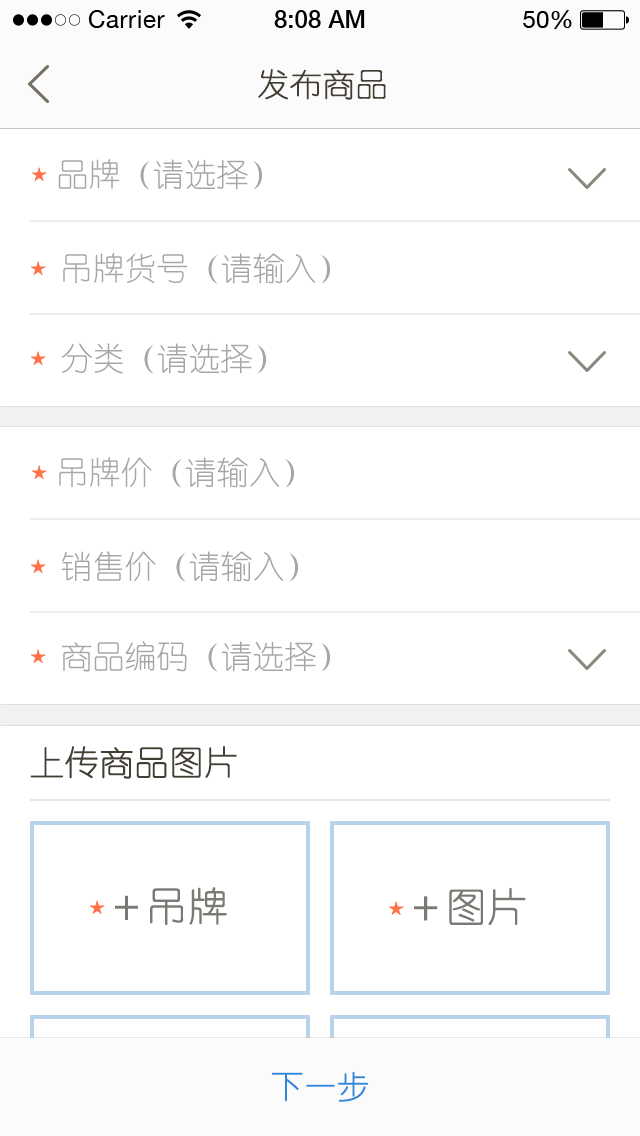
<style>
.page{position:relative;width:640px;height:1136px;background:#ffffff}
.page>*{position:absolute;margin:0}
.t1{font:32px "YouYuan";color:#433d33;text-transform:uppercase;font-weight:bold}
.t2{font:32px "YouYuan";color:#a7a6a3;text-transform:uppercase}
.t3{font:34px "YouYuan";color:#433e34;text-transform:uppercase;font-weight:bold}
.t4{font:40px "YouYuan";color:#7b7973;text-transform:uppercase;font-weight:bold}
.t5{font:32px "YouYuan";color:#2f88da;text-transform:uppercase;font-weight:bold}
</style>
<div class="page">
<p class="t1" style="left:258px;top:69px;width:128px;height:31px">发布商品</p>
<p class="t2" style="left:58px;top:159px;width:204px;height:31px">品牌（请选择）</p>
<p class="t2" style="left:63px;top:253px;width:267px;height:31px">吊牌货号（请输入）</p>
<p class="t2" style="left:61px;top:343px;width:205px;height:31px">分类（请选择）</p>
<p class="t2" style="left:59px;top:457px;width:235px;height:31px">吊牌价（请输入）</p>
<p class="t2" style="left:61px;top:551px;width:237px;height:31px">销售价（请输入）</p>
<p class="t2" style="left:61px;top:641px;width:269px;height:31px">商品编码（请选择）</p>
<p class="t3" style="left:30px;top:746px;width:207px;height:33px">上传商品图片</p>
<p class="t4" style="left:115px;top:887px;width:112px;height:39px">＋吊牌</p>
<p class="t4" style="left:414px;top:887px;width:112px;height:38px">＋图片</p>
<p class="t5" style="left:271px;top:1071px;width:98px;height:31px">下一步</p>
</div>
